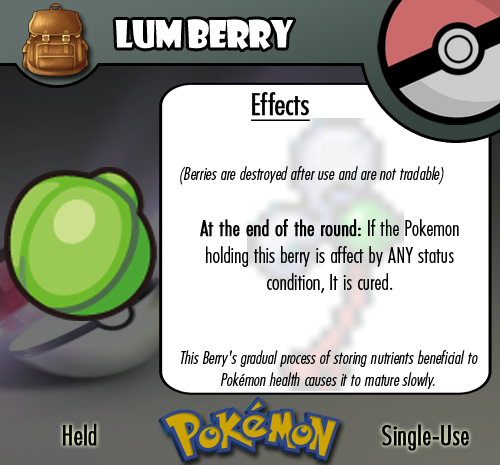
<style>
.page{position:relative;width:500px;height:465px;background:#ffffff}
.page>*{position:absolute;margin:0}
.t1{font:36.7px "ShowcardGothic-Reg";letter-spacing:-0.025em;color:#ffffff;scale:0.91 1}
.t2{font:22.2px "FuturaCondensedBQ-Light";color:#010101}
.t3{font:27.8px "FuturaCondensedBQ-Light";color:#010101;font-weight:bold}
.t4{font:30.6px "FuturaCondensedBQ-Light";color:#010101;font-weight:bold;text-decoration:underline}
.t5{font:18.1px "FuturaCondensedBQ-Light";color:#010101;font-style:italic}
.t6{font:22.2px "FuturaCondensedBQ-Light";color:#010101;font-weight:bold}
</style>
<div class="page">
<p class="t1" style="left:115px;top:19px;width:179px;height:31px">Lum Berry</p>
<p class="t2" style="left:180px;top:92px;width:279px;height:202px"><span class="t3">  </span><span class="t4">Effects<br><br><br></span><span class="t5">(Berries are destroyed after use and are not tradable)<br><br><br><br></span><span class="t6">At the end of the round:</span> If the Pokemon holding this berry is affect by ANY status condition, It is cured.</p>
<p class="t5" style="left:181px;top:350px;width:297px;height:39px;text-align:center">This Berry's gradual process of storing nutrients beneficial to Pokémon health causes it to mature slowly.</p>
<p class="t3" style="left:63px;top:423px;width:34px;height:23px">Held</p>
<p class="t3" style="left:382px;top:424px;width:87px;height:27px">Single-Use</p>
</div>
